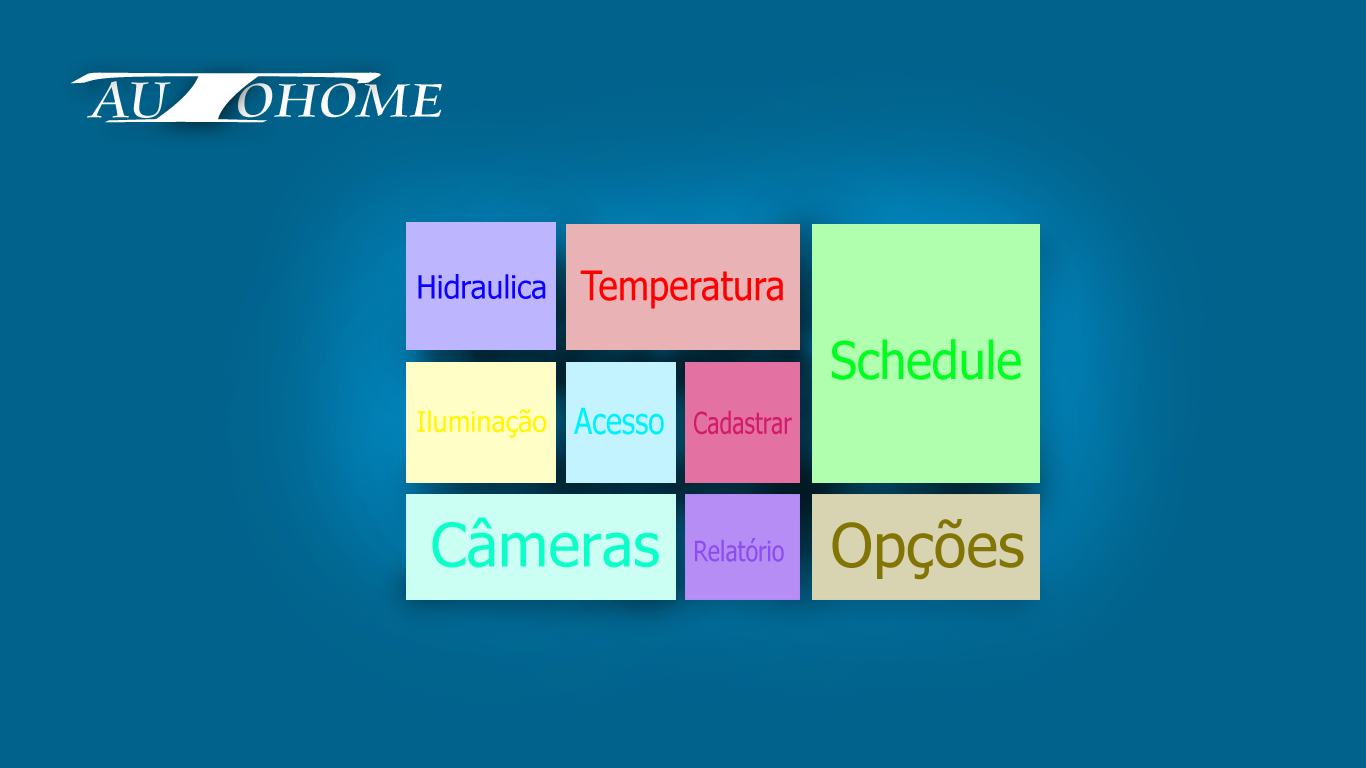
<style>
.page{position:relative;width:1366px;height:768px;background:#01628b}
.page>*{position:absolute;margin:0}
.t1{font:55.7px "CataneoBT-Regular";color:#ffffff;scale:1.08 1}
.t2{font:51.5px "CataneoBT-Regular";color:#ffffff;scale:1.17 1}
.t3{font:41.1px "Tahoma";color:#ff0000;scale:0.9 1}
.t4{font:31.9px "Tahoma";color:#0c00ff;scale:0.95 1}
.t5{font:52.1px "Tahoma";color:#00ff1e;scale:0.93 1}
.t6{font:28.2px "Tahoma";color:#fff600;scale:0.96 1}
.t7{font:36px "Tahoma";color:#00f0ff;scale:0.83 1}
.t8{font:30px "Tahoma";color:#d21b69;scale:0.77 1}
.t9{font:60px "Tahoma";color:#0cffc9}
.t10{font:60px "Tahoma";color:#827506}
.t11{font:28.3px "Tahoma";color:#8d4cef;scale:0.82 1}
</style>
<div class="page">
<p class="t1" style="left:87px;top:81px;width:84px;height:37px">AU</p>
<p class="t2" style="left:238px;top:83px;width:204px;height:35px">OHOME</p>
<p class="t3" style="left:580px;top:270px;width:203px;height:39px">Temperatura</p>
<p class="t4" style="left:418px;top:274px;width:128px;height:25px">Hidraulica</p>
<p class="t5" style="left:831px;top:339px;width:190px;height:41px">Schedule</p>
<p class="t6" style="left:417px;top:409px;width:130px;height:29px">Iluminação</p>
<p class="t7" style="left:574px;top:407px;width:90px;height:28px">Acesso</p>
<p class="t8" style="left:694px;top:410px;width:98px;height:25px">Cadastrar</p>
<p class="t9" style="left:432px;top:517px;width:227px;height:51px">Câmeras</p>
<p class="t10" style="left:832px;top:519px;width:192px;height:61px">Opções</p>
<p class="t11" style="left:695px;top:538px;width:89px;height:24px">Relatório</p>
</div>
